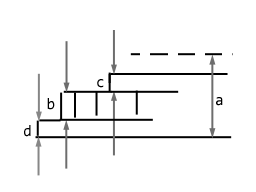
<style>
.page{position:relative;width:256px;height:192px;background:#ffffff}
.page>*{position:absolute;margin:0}
.t1{font:16px "Consolas";color:#000000}
</style>
<div class="page">
<p class="t1" style="left:97px;top:79px;width:7px;height:9px">c</p>
<p class="t1" style="left:47px;top:98px;width:8px;height:12px">b</p>
<p class="t1" style="left:216px;top:97px;width:7px;height:9px">a</p>
<p class="t1" style="left:24px;top:125px;width:7px;height:12px">d</p>
</div>
